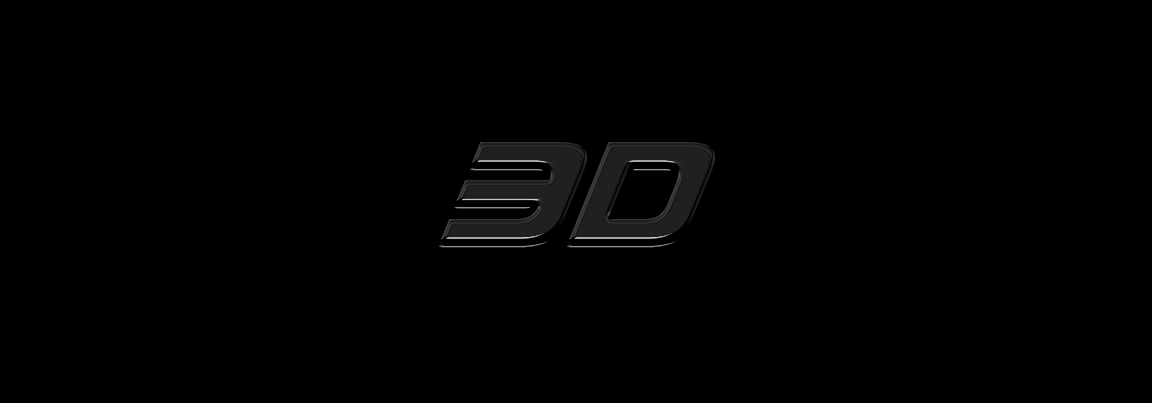
<style>
.page{position:relative;width:1152px;height:403px;background:#000000}
.page>*{position:absolute;margin:0}
.t1{font:172px "UsuziItalic";letter-spacing:-0.025em;color:#202020;font-weight:bold}
</style>
<div class="page">
<p class="t1" style="left:439px;top:141px;width:277px;height:102px">3d</p>
</div>
